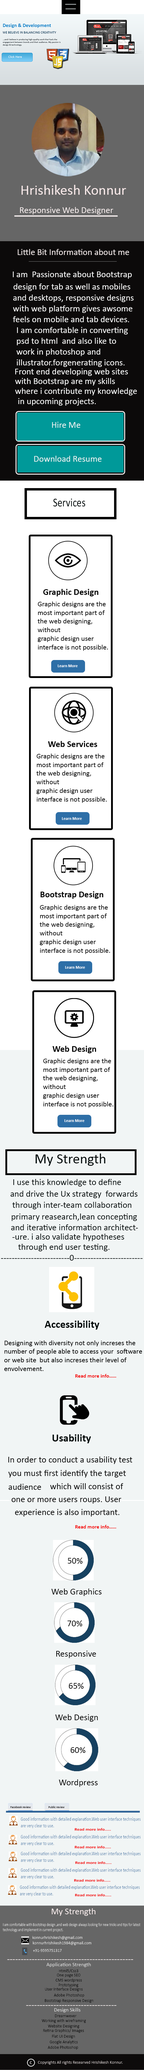
<style>
.page{position:relative;width:144px;height:2070px;background:#ffffff}
.page>*{position:absolute;margin:0}
.t1{font:14.4px "Calibri";color:#f8e9e9}
.t2{font:9px "Calibri";color:#f9f0f0}
.t3{font:9px "Calibri";color:#f9efef}
.t4{font:9px "Calibri";color:#ffffff}
.t5{font:9px "Calibri";color:#f0f5f5}
.t6{font:12.1px "Calibri";color:#010909;scale:0.81 1}
.t7{font:14.4px "Calibri";color:#010909}
.t8{font:9px "Calibri";color:#010909}
.t9{font:10.8px "Calibri-Bold";color:#010909}
.t10{font:7.2px "Calibri";color:#000000}
.t11{font:5.4px "Calibri-Bold";color:#f40909}
.t12{font:9px "Calibri";color:#000000}
.t13{font:3.7px "Calibri-Bold";color:#f40909;scale:1.27 1}
.t14{font:9px "Calibri";color:#fbefef}
</style>
<div class="page">
<p class="t1" style="left:22px;top:185px;width:104px;height:10px">Hrishikesh Konnur</p>
<p class="t2" style="left:20px;top:207px;width:93px;height:7px">Responsive Web Designer</p>
<p class="t3" style="left:18px;top:249px;width:111px;height:6px">Little Bit Information about me</p>
<p class="t4" style="left:13px;top:271px;width:119px;height:8px">I am  Passionate about Bootstrap</p>
<p class="t4" style="left:14px;top:284px;width:116px;height:7px">design for tab as well as mobiles</p>
<p class="t4" style="left:13px;top:295px;width:121px;height:27px">and desktops, responsive designs<br>with web platform gives awsome<br>feels on mobile and tab devices.</p>
<p class="t4" style="left:16px;top:327px;width:112px;height:40px">I am comfortable in converting<br>psd to html  and also like to <br>work in photoshop and <br>illustrator.forgenerating icons.</p>
<p class="t4" style="left:15px;top:368px;width:113px;height:8px">Front end developing web sites</p>
<p class="t4" style="left:15px;top:378px;width:100px;height:8px">with Bootstrap are my skills</p>
<p class="t4" style="left:15px;top:388px;width:122px;height:7px">where i contribute my knowledge</p>
<p class="t4" style="left:18px;top:398px;width:78px;height:8px">in upcoming projects.</p>
<p class="t5" style="left:52px;top:422px;width:28px;height:6px">Hire Me</p>
<p class="t5" style="left:34px;top:456px;width:68px;height:6px">Download Resume</p>
<p class="t6" style="left:53px;top:499px;width:33px;height:8px">Services</p>
<p class="t7" style="left:36px;top:1154px;width:70px;height:12px">My Strength</p>
<p class="t8" style="left:13px;top:1179px;width:108px;height:7px">I use this knowledge to define</p>
<p class="t8" style="left:10px;top:1191px;width:128px;height:7px">and drive the Ux strategy  forwards</p>
<p class="t8" style="left:12px;top:1202px;width:120px;height:7px">through inter-team collaboration</p>
<p class="t8" style="left:12px;top:1214px;width:125px;height:7px">primary reasearch,lean concepting</p>
<p class="t8" style="left:11px;top:1224px;width:127px;height:6px">and iterative information architect-</p>
<p class="t8" style="left:12px;top:1234px;width:112px;height:7px">-ure. i also validate hypotheses</p>
<p class="t8" style="left:18px;top:1244px;width:92px;height:7px">through end user testing.</p>
<p class="t8" style="left:1px;top:1255px;width:142px;height:6px">-------------------------0-------------------------</p>
<p class="t9" style="left:45px;top:1321px;width:55px;height:9px">Accessibility</p>
<p class="t10" style="left:4px;top:1340px;width:138px;height:31px">Designing with diversity not only increses the<br>number of people able to access your  software<br>or web site  but also increses their level of <br>envolvement.</p>
<p class="t11" style="left:75px;top:1374px;width:41px;height:4px">Read more info.....</p>
<p class="t9" style="left:52px;top:1434px;width:39px;height:9px">Usability</p>
<p class="t12" style="left:8px;top:1456px;width:125px;height:8px">In order to conduct a usability test</p>
<p class="t12" style="left:8px;top:1470px;width:118px;height:8px">you must first identify the target</p>
<p class="t12" style="left:8px;top:1484px;width:33px;height:6px">audience</p>
<p class="t12" style="left:50px;top:1483px;width:74px;height:6px">which will consist of</p>
<p class="t12" style="left:11px;top:1496px;width:111px;height:8px">one or more users roups. User</p>
<p class="t12" style="left:15px;top:1509px;width:105px;height:7px">experience is also important.</p>
<p class="t11" style="left:75px;top:1525px;width:41px;height:3px">Read more info.....</p>
<p class="t12" style="left:68px;top:1558px;width:15px;height:6px">50%</p>
<p class="t12" style="left:52px;top:1588px;width:50px;height:8px">Web Graphics</p>
<p class="t12" style="left:68px;top:1620px;width:14px;height:7px">70%</p>
<p class="t12" style="left:56px;top:1651px;width:40px;height:7px">Responsive</p>
<p class="t12" style="left:69px;top:1683px;width:15px;height:6px">65%</p>
<p class="t12" style="left:56px;top:1714px;width:42px;height:8px">Web Design</p>
<p class="t12" style="left:71px;top:1747px;width:15px;height:6px">60%</p>
<p class="t12" style="left:59px;top:1779px;width:39px;height:8px">Wordpress</p>
<p class="t13" style="left:75px;top:1828px;width:36px;height:3px">Read more info.....</p>
<p class="t13" style="left:75px;top:1846px;width:36px;height:3px">Read more info.....</p>
<p class="t13" style="left:75px;top:1861px;width:37px;height:3px">Read more info.....</p>
<p class="t13" style="left:74px;top:1879px;width:36px;height:3px">Read more info.....</p>
<p class="t13" style="left:75px;top:1894px;width:36px;height:3px">Read more info.....</p>
<p class="t14" style="left:52px;top:1908px;width:44px;height:8px">My Strength</p>
<p class="t14" style="left:7px;top:1959px;width:127px;height:1px">----------------------------------------------</p>
<p class="t14" style="left:26px;top:2005px;width:91px;height:1px">---------------------------------</p>
</div>
